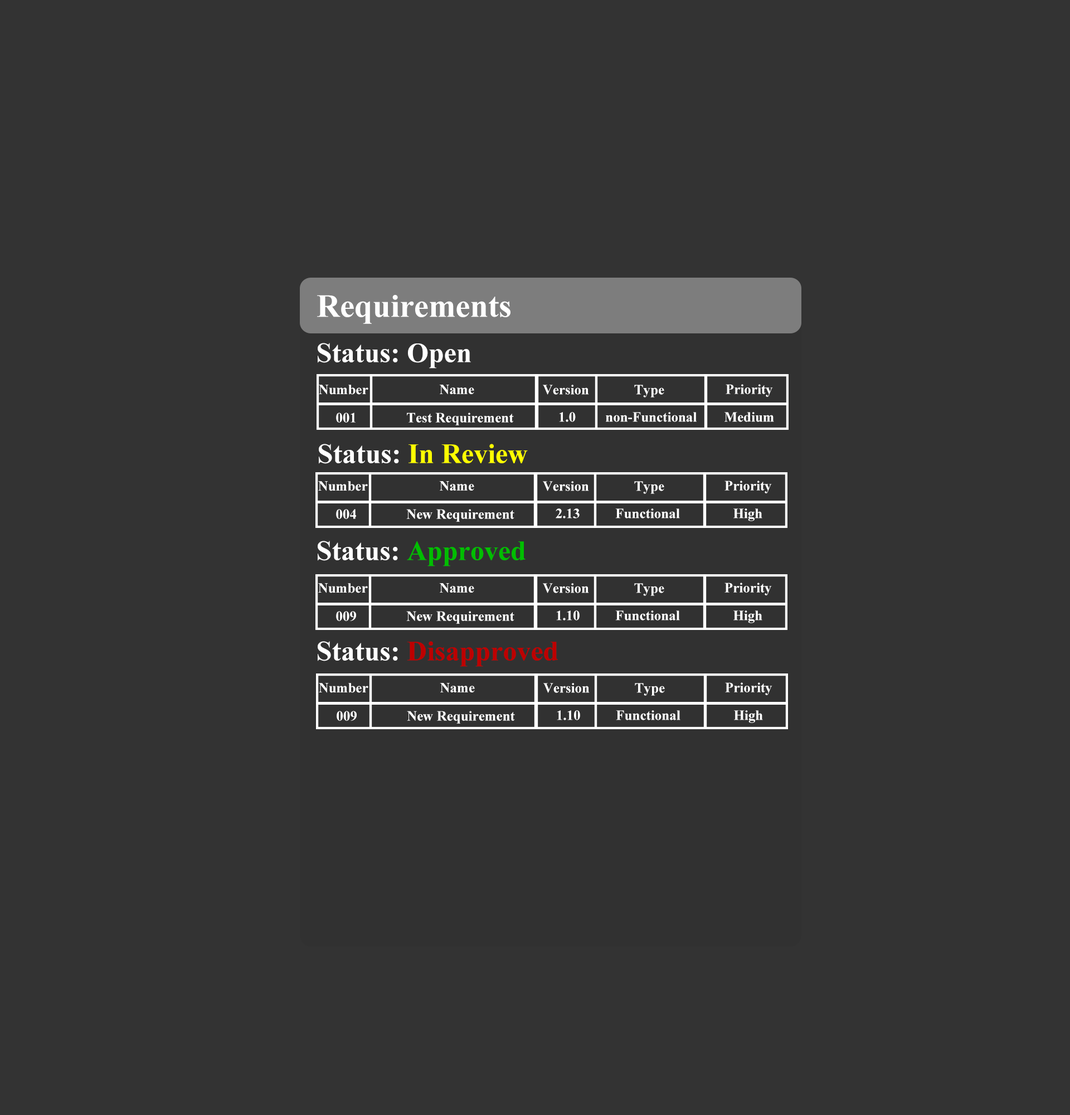
<style>
.page{position:relative;width:1070px;height:1115px;background:#333333}
.page>*{position:absolute;margin:0}
.t1{font:32.5px "TimesNewRomanPS-BoldMT";color:#ffffff}
.t2{font:27.9px "TimesNewRomanPS-BoldMT";color:#ffffff}
.t3{font:13.9px "TimesNewRomanPS-BoldMT";color:#ffffff}
.t4{font:27.9px "TimesNewRomanPS-BoldMT";color:#ffff00}
.t5{font:27.9px "TimesNewRomanPS-BoldMT";color:#00be00}
.t6{font:27.9px "TimesNewRomanPS-BoldMT";color:#be0000}
</style>
<div class="page">
<p class="t1" style="left:317px;top:295px;width:193px;height:29px">Requirements</p>
<p class="t2" style="left:318px;top:343px;width:153px;height:25px">Status: Open</p>
<p class="t3" style="left:319px;top:385px;width:49px;height:10px">Number</p>
<p class="t3" style="left:439px;top:385px;width:35px;height:9px">Name</p>
<p class="t3" style="left:543px;top:385px;width:46px;height:10px">Version</p>
<p class="t3" style="left:634px;top:385px;width:30px;height:12px">Type</p>
<p class="t3" style="left:726px;top:384px;width:47px;height:13px">Priority</p>
<p class="t3" style="left:336px;top:412px;width:20px;height:10px">001</p>
<p class="t3" style="left:407px;top:412px;width:107px;height:13px">Test Requirement</p>
<p class="t3" style="left:559px;top:412px;width:17px;height:10px">1.0</p>
<p class="t3" style="left:606px;top:412px;width:91px;height:10px">non-Functional</p>
<p class="t3" style="left:724px;top:412px;width:50px;height:10px">Medium</p>
<p class="t4" style="left:319px;top:444px;width:209px;height:20px"><span class="t2">Status: </span>In Review</p>
<p class="t3" style="left:318px;top:481px;width:50px;height:10px">Number</p>
<p class="t3" style="left:439px;top:481px;width:35px;height:9px">Name</p>
<p class="t3" style="left:543px;top:481px;width:46px;height:10px">Version</p>
<p class="t3" style="left:634px;top:481px;width:30px;height:13px">Type</p>
<p class="t3" style="left:724px;top:480px;width:48px;height:13px">Priority</p>
<p class="t3" style="left:336px;top:509px;width:20px;height:10px">004</p>
<p class="t3" style="left:406px;top:509px;width:108px;height:13px">New Requirement</p>
<p class="t3" style="left:556px;top:508px;width:24px;height:10px">2.13</p>
<p class="t3" style="left:615px;top:508px;width:65px;height:10px">Functional</p>
<p class="t3" style="left:733px;top:508px;width:29px;height:13px">High</p>
<p class="t5" style="left:318px;top:541px;width:207px;height:25px"><span class="t2">Status: </span>Approved</p>
<p class="t3" style="left:318px;top:583px;width:50px;height:10px">Number</p>
<p class="t3" style="left:439px;top:583px;width:35px;height:9px">Name</p>
<p class="t3" style="left:543px;top:583px;width:46px;height:10px">Version</p>
<p class="t3" style="left:634px;top:583px;width:30px;height:13px">Type</p>
<p class="t3" style="left:724px;top:582px;width:48px;height:13px">Priority</p>
<p class="t3" style="left:336px;top:611px;width:20px;height:10px">009</p>
<p class="t3" style="left:406px;top:611px;width:108px;height:13px">New Requirement</p>
<p class="t3" style="left:556px;top:610px;width:24px;height:10px">1.10</p>
<p class="t3" style="left:615px;top:610px;width:65px;height:10px">Functional</p>
<p class="t3" style="left:733px;top:610px;width:29px;height:13px">High</p>
<p class="t6" style="left:318px;top:641px;width:240px;height:25px"><span class="t2">Status: </span>Disapproved</p>
<p class="t3" style="left:319px;top:683px;width:49px;height:10px">Number</p>
<p class="t3" style="left:440px;top:683px;width:35px;height:9px">Name</p>
<p class="t3" style="left:543px;top:683px;width:47px;height:10px">Version</p>
<p class="t3" style="left:635px;top:683px;width:30px;height:12px">Type</p>
<p class="t3" style="left:725px;top:682px;width:47px;height:13px">Priority</p>
<p class="t3" style="left:337px;top:710px;width:20px;height:11px">009</p>
<p class="t3" style="left:407px;top:710px;width:108px;height:13px">New Requirement</p>
<p class="t3" style="left:557px;top:710px;width:23px;height:10px">1.10</p>
<p class="t3" style="left:616px;top:710px;width:64px;height:10px">Functional</p>
<p class="t3" style="left:734px;top:710px;width:29px;height:13px">High</p>
</div>
